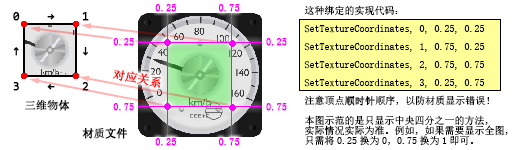
<style>
.page{position:relative;width:519px;height:150px;background:#ffffff}
.page>*{position:absolute;margin:0}
.t1{font:10px/18px "SimSun";color:#000000}
.t2{font:10px/10px "SimSun";color:#000000}
.t3{font:10px/10px "SimSun";color:#000000;font-weight:bold}
.t4{font:11px/14px "SimSun";color:#000000;font-weight:bold}
.t5{font:12px/35px "Consolas";letter-spacing:2.3em;color:#000000;font-weight:bold}
.t6{font:12px/20px "Consolas";letter-spacing:2.3em;color:#000000;font-weight:bold}
.t7{font:12px "SimSun";color:#ff0000;font-weight:bold}
</style>
<div class="page">
<p class="t1" style="left:304px;top:5px;width:204px;height:141px">这种绑定的实现代码：<br>SetTextureCoordinates, 0, 0.25, 0.25<br>SetTextureCoordinates, 1, 0.75, 0.25<br>SetTextureCoordinates, 2, 0.75, 0.75<br>SetTextureCoordinates, 3, 0.25, 0.75<br><span class="t2">注意顶点</span><span class="t3">顺时针</span><span class="t2">顺序，以防材质显示错误！<br><br>本图示范的是只显示中央四分之一的方法，<br>实际情况实际为准。例如，如果需要显示全图，<br>只需将0.25换为0，0.75换为1即可。</span></p>
<p class="t4" style="left:13px;top:12px;width:115px;height:127px"><span class="t5">0→1<br>↑ ↓<br></span><span class="t6">3←2<br>  </span>三维物体<br><br>            材质文件</p>
<p class="t7" style="left:112px;top:70px;width:49px;height:18px;rotate:10deg">对应关系</p>
</div>
